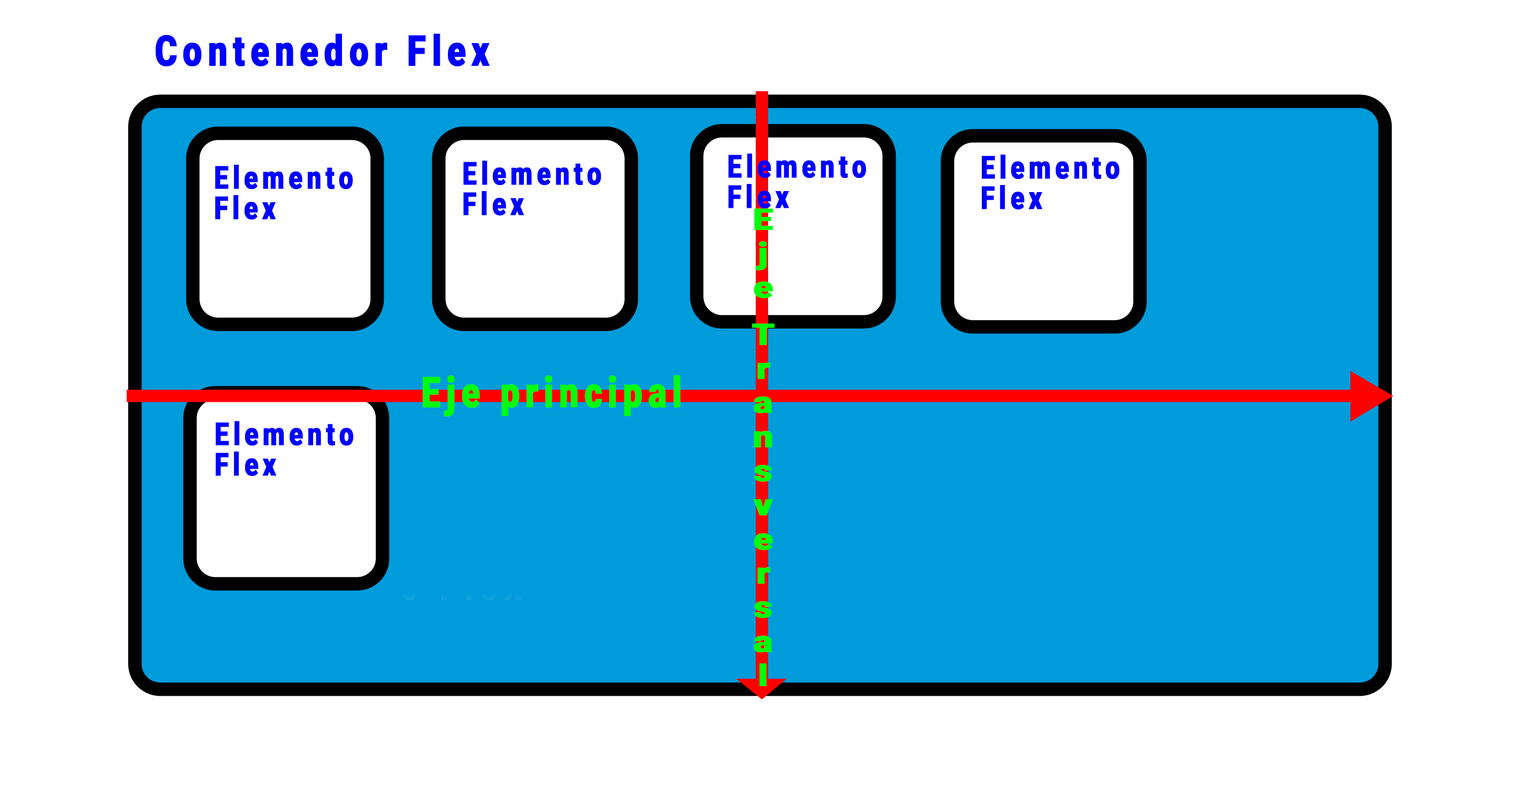
<style>
.page{position:relative;width:1520px;height:785px;background:#ffffff}
.page>*{position:absolute;margin:0}
.t1{font:42.2px "Roboto-Black";letter-spacing:0.15em;color:#0000ff;font-weight:bold;scale:0.8 1}
.t2{font:31.7px "Roboto-Black";letter-spacing:0.15em;color:#0000ff;font-weight:bold;scale:0.8 1}
.t3{font:23.7px "Roboto-Black";letter-spacing:0.15em;color:#00ff0c;font-weight:bold;scale:1.9 1}
.t4{font:42.2px "Roboto-Black";letter-spacing:0.15em;color:#00ff0c;font-weight:bold;scale:0.8 1}
</style>
<div class="page">
<p class="t1" style="left:156px;top:33px;width:333px;height:33px">Contenedor Flex</p>
<p class="t2" style="left:463px;top:161px;width:138px;height:55px">Elemento Flex</p>
<p class="t2" style="left:728px;top:153px;width:138px;height:56px">Elemento Flex</p>
<p class="t2" style="left:981px;top:155px;width:138px;height:55px">Elemento Flex</p>
<p class="t2" style="left:215px;top:165px;width:138px;height:55px">Elemento Flex</p>
<p class="t3" style="left:752px;top:208px;width:23px;height:478px;text-align:center">Eje Transversal</p>
<p class="t4" style="left:422px;top:375px;width:258px;height:41px">Eje principal</p>
<p class="t2" style="left:215px;top:421px;width:139px;height:55px">Elemento Flex</p>
</div>
